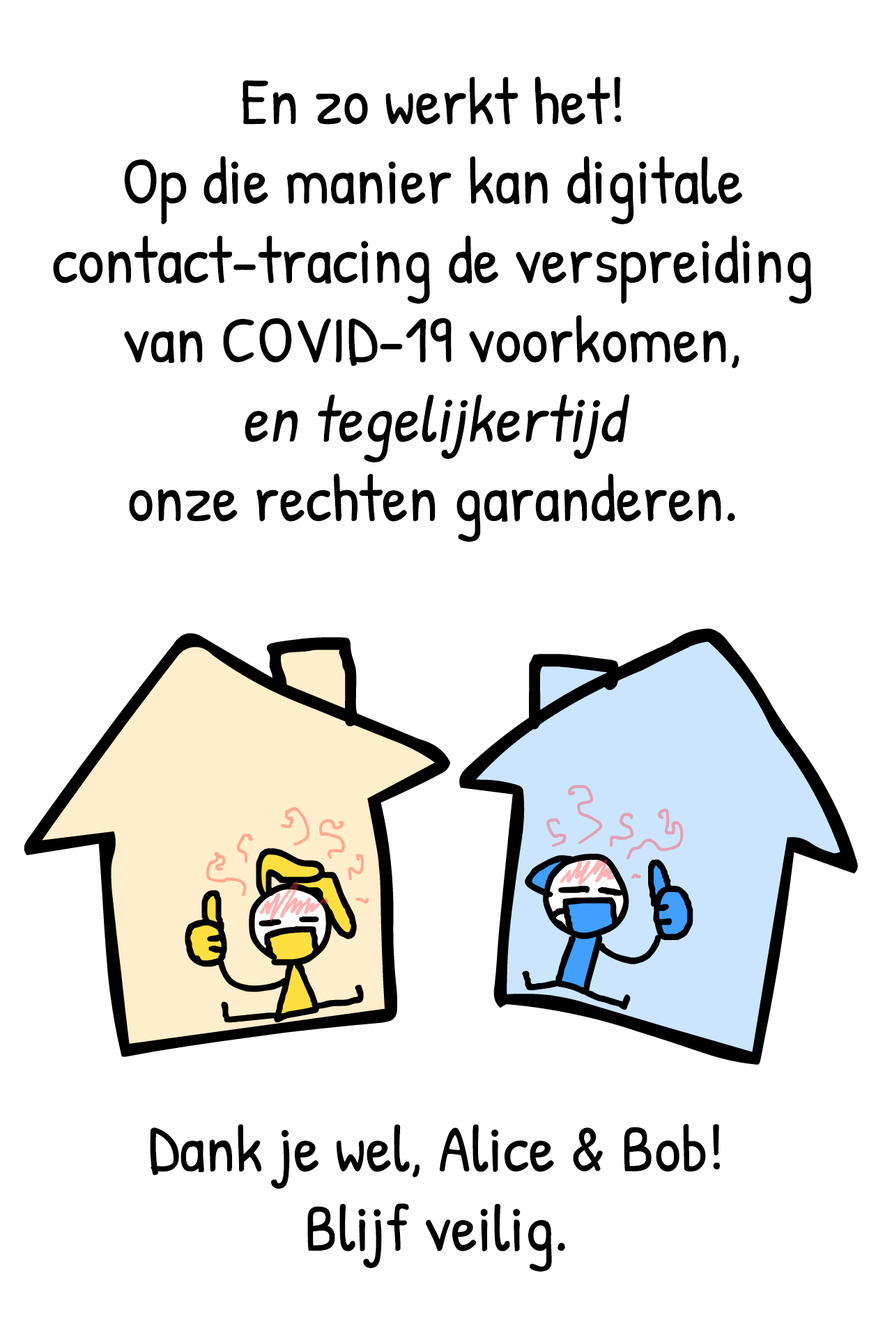
<style>
.page{position:relative;width:892px;height:1337px;background:#ffffff}
.page>*{position:absolute;margin:0}
.t1{font:66.2px "PatrickHand-Regular";color:#000000}
.t2{font:66.2px "PatrickHand-Regular";color:#000000;font-style:italic}
</style>
<div class="page">
<p class="t1" style="left:53px;top:77px;width:758px;height:465px;text-align:center">En zo werkt het!<br>Op die manier kan digitale<br>contact-tracing de verspreiding<br>van COVID-19 voorkomen,<br><span class="t2">en tegelijkertijd<br></span>onze rechten garanderen.</p>
<p class="t1" style="left:150px;top:1124px;width:570px;height:148px;text-align:center">Dank je wel, Alice &amp; Bob!<br>Blijf veilig.</p>
</div>
